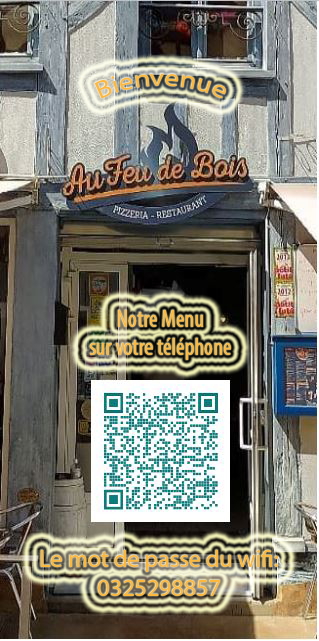
<style>
.page{position:relative;width:319px;height:641px}
.page>*{position:absolute;margin:0}
.t1{font:24px "MyriadPro-Regular";color:#fdb73a}
.t2{font:24px "MyriadPro-Cond";color:#fdb73a}
</style>
<div class="page">
<p class="t1" style="left:94px;top:73px;width:132px;height:26px">Bienvenue</p>
<p class="t2" style="left:90px;top:310px;width:141px;height:50px;text-align:center">Notre Menu<br>sur votre téléphone</p>
<p class="t1" style="left:41px;top:550px;width:237px;height:46px;text-align:center">Le mot de passe du wifi:<br>0325298857</p>
</div>
